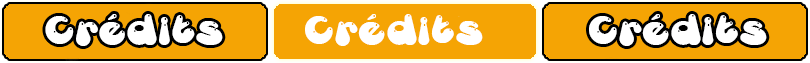
<style>
.page{position:relative;width:810px;height:63px;background:#f5a404}
.page>*{position:absolute;margin:0}
.t1{font:30px "GretoonHighlight";letter-spacing:0.1em;color:#ffffff}
</style>
<div class="page">
<p class="t1" style="left:45px;top:14px;width:178px;height:32px">Crédits</p>
<p class="t1" style="left:305px;top:14px;width:178px;height:32px">Crédits</p>
<p class="t1" style="left:589px;top:14px;width:178px;height:32px">Crédits</p>
</div>
